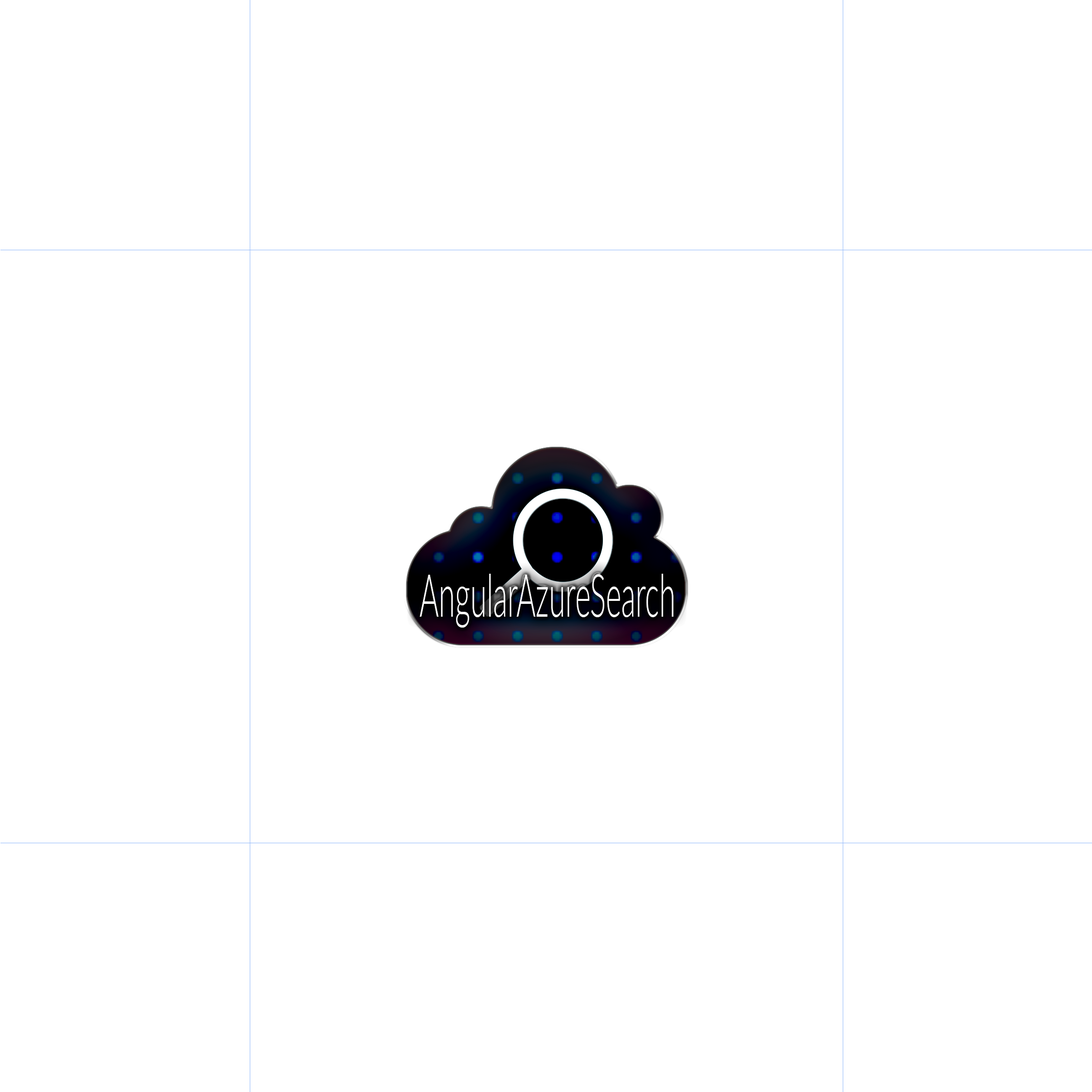
<style>
.page{position:relative;width:1092px;height:1092px;background:#ffffff}
.page>*{position:absolute;margin:0}
.t1{font:59.3px "Lato-Light";color:#fdfdfe;scale:0.5 1}
</style>
<div class="page">
<p class="t1" style="left:419px;top:574px;width:255px;height:54px">AngularAzureSearch</p>
</div>
